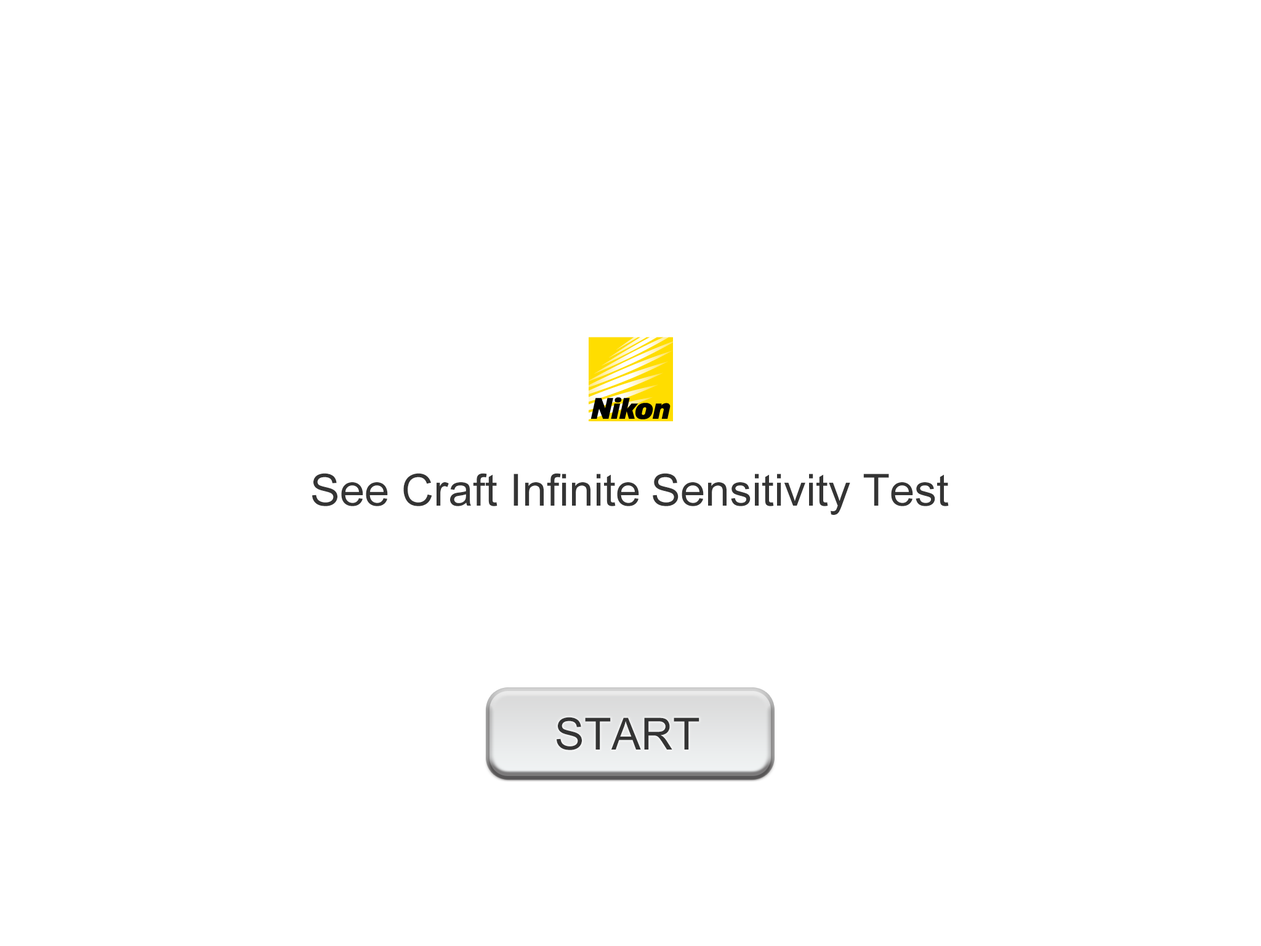
<style>
.page{position:relative;width:1261px;height:946px;background:#ffffff}
.page>*{position:absolute;margin:0}
.t1{font:44.3px "ArialMT";color:#343434}
</style>
<div class="page">
<p class="t1" style="left:312px;top:473px;width:637px;height:42px">See Craft Infinite Sensitivity Test</p>
<p class="t1" style="left:557px;top:717px;width:142px;height:33px">START</p>
</div>
